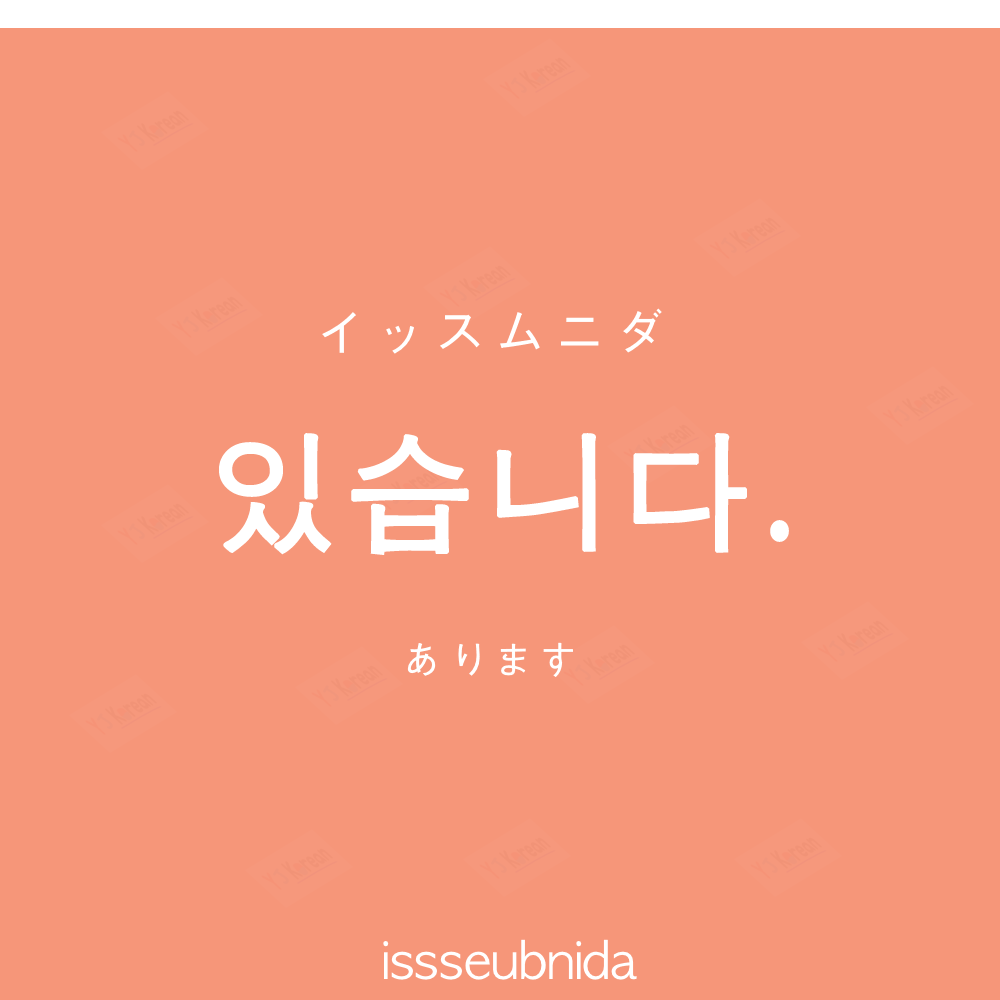
<style>
.page{position:relative;width:1000px;height:1000px;background:#f69679}
.page>*{position:absolute;margin:0}
.t1{font:60px "AppleGothic";color:#ffffff}
.t2{font:130px "AppleGothic";letter-spacing:0.04em;color:#ffffff;font-weight:bold}
.t3{font:45px "AppleGothic";color:#ffffff}
.t4{font:50px "AppleGothic";color:#ffffff}
</style>
<div class="page">
<p class="t1" style="left:322px;top:308px;width:340px;height:46px">イッスムニダ</p>
<p class="t2" style="left:219px;top:433px;width:570px;height:122px">있습니다.</p>
<p class="t3" style="left:407px;top:642px;width:166px;height:35px">あります</p>
<p class="t4" style="left:383px;top:939px;width:254px;height:41px">issseubnida</p>
</div>
